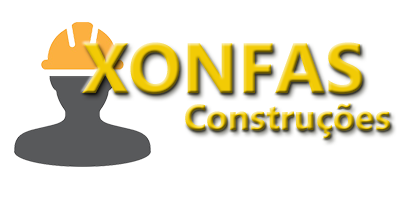
<style>
.page{position:relative;width:400px;height:200px;background:#ffffff}
.page>*{position:absolute;margin:0}
.t1{font:70.9px "MicrosoftNewTaiLue-Bold"}
.t2{font:36px "MicrosoftNewTaiLue-Bold"}
</style>
<div class="page">
<p class="t1" style="left:82px;top:42px;width:281px;height:52px">XONFAS</p>
<p class="t2" style="left:185px;top:103px;width:205px;height:36px">Construções</p>
</div>
